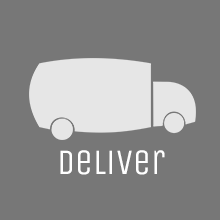
<style>
.page{position:relative;width:220px;height:220px;background:#777777}
.page>*{position:absolute;margin:0}
.t1{font:35.7px "UnicaOne-Regular";color:#ffffff}
</style>
<div class="page">
<p class="t1" style="left:60px;top:150px;width:105px;height:25px">Deliver</p>
</div>
